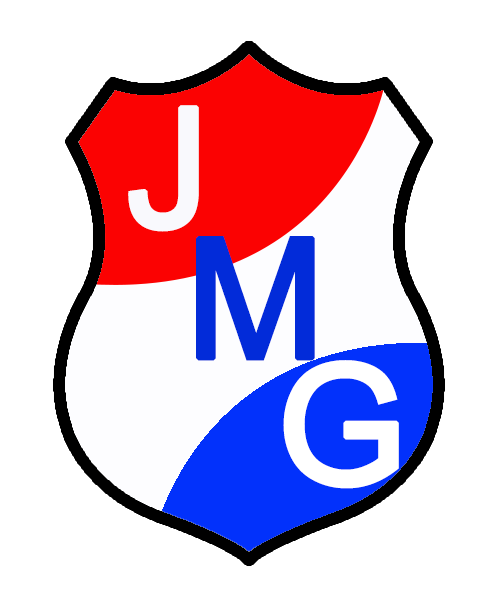
<style>
.page{position:relative;width:500px;height:600px;background:#ffffff}
.page>*{position:absolute;margin:0}
.t1{font:166.7px "ArialMT";letter-spacing:0.05em;color:#f9fafd;font-weight:bold}
.t2{font:166.7px "ArialMT";letter-spacing:0.05em;color:#032bda;font-weight:bold}
.t3{font:166.7px "ArialMT";letter-spacing:0.05em;color:#ffffff;font-weight:bold}
</style>
<div class="page">
<p class="t1" style="left:128px;top:105px;width:71px;height:127px">J</p>
<p class="t2" style="left:196px;top:236px;width:119px;height:125px">M</p>
<p class="t3" style="left:283px;top:360px;width:116px;height:129px">G</p>
</div>
